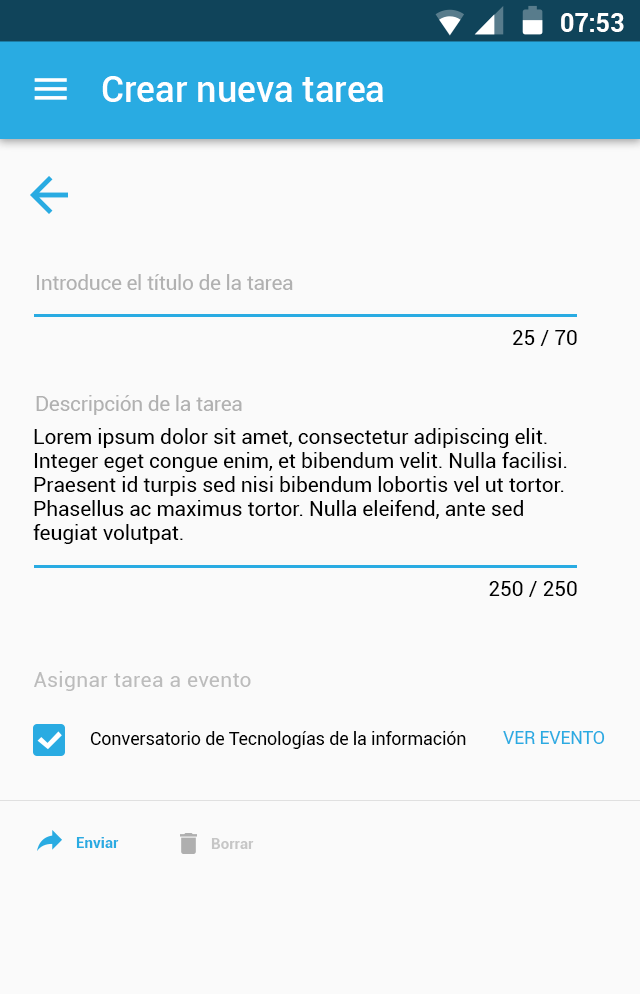
<style>
.page{position:relative;width:640px;height:994px;background:#fafafa}
.page>*{position:absolute;margin:0}
.t1{font:24.9px "Roboto-Bold";color:#ffffff}
.t2{font:35.8px "Roboto-Medium";letter-spacing:0.005em;color:#ffffff}
.t3{font:20.8px "Roboto-Regular";letter-spacing:-0.01em;color:#b1b1b1}
.t4{font:20.8px "Roboto-Regular";color:#000000}
.t5{font:20.7px/24px "Roboto-Regular";color:#000000}
.t6{font:20.8px "Roboto-Regular";letter-spacing:0.02em;color:#bcbcbc}
.t7{font:18px "Roboto-Regular";letter-spacing:-0.01em;color:#000000}
.t8{font:18px "Roboto-Regular";letter-spacing:-0.01em;color:#29abe2}
.t9{font:14.8px "Roboto-Bold";letter-spacing:0.01em;color:#29abe2}
.t10{font:14.8px "Roboto-Bold";letter-spacing:0.01em;color:#c6c6c6}
</style>
<div class="page">
<p class="t1" style="left:561px;top:13px;width:63px;height:19px">07:53</p>
<p class="t2" style="left:102px;top:76px;width:281px;height:26px">Crear nueva tarea</p>
<p class="t3" style="left:36px;top:274px;width:257px;height:16px">Introduce el título de la tarea</p>
<p class="t4" style="left:513px;top:330px;width:64px;height:16px">25 / 70</p>
<p class="t3" style="left:36px;top:395px;width:206px;height:20px">Descripción de la tarea</p>
<p class="t5" style="left:33px;top:428px;width:534px;height:116px">Lorem ipsum dolor sit amet, consectetur adipiscing elit. Integer eget congue enim, et bibendum velit. Nulla facilisi. Praesent id turpis sed nisi bibendum lobortis vel ut tortor. Phasellus ac maximus tortor. Nulla eleifend, ante sed feugiat volutpat.</p>
<p class="t4" style="left:489px;top:581px;width:88px;height:16px">250 / 250</p>
<p class="t6" style="left:34px;top:671px;width:217px;height:20px">Asignar tarea a evento</p>
<p class="t7" style="left:90px;top:731px;width:376px;height:18px">Conversatorio de Tecnologías de la información</p>
<p class="t8" style="left:503px;top:731px;width:102px;height:13px">VER EVENTO</p>
<p class="t9" style="left:76px;top:837px;width:43px;height:11px">Enviar</p>
<p class="t10" style="left:211px;top:838px;width:43px;height:11px">Borrar</p>
</div>
